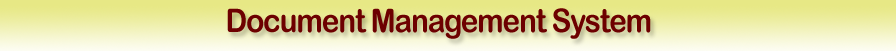
<style>
.page{position:relative;width:896px;height:51px}
.page>*{position:absolute;margin:0}
.t1{font:32.5px "ArialRoundedMTBold";letter-spacing:-0.04em;color:#6d0000;scale:0.92 1}
</style>
<div class="page">
<p class="t1" style="left:227px;top:8px;width:424px;height:31px">Document Management System</p>
</div>
